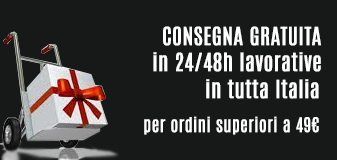
<style>
.page{position:relative;width:337px;height:160px;background:#171918}
.page>*{position:absolute;margin:0}
.t1{font:21.3px/173.3px "Antonio-Regular";color:#ffffff;font-weight:bold}
.t2{font:21.3px "Antonio-Regular";color:#ffffff;font-weight:bold}
.t3{font:17.3px "Antonio-Regular";color:#ffffff;font-weight:bold}
</style>
<div class="page">
<p class="t1" style="left:163px;top:26px;width:158px;height:20px;text-align:right">CONSEGNA GRATUITA<br><br>INB <br>IN 24/48h lavorative</p>
<p class="t2" style="left:153px;top:52px;width:168px;height:20px">in 24/48h lavorative</p>
<p class="t2" style="left:206px;top:79px;width:113px;height:20px">in tutta Italia</p>
<p class="t3" style="left:144px;top:116px;width:175px;height:19px">per ordini superiori a 49€</p>
</div>
